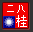
<style>
.page{position:relative;width:33px;height:32px;background:#f20000}
.page>*{position:absolute;margin:0}
.t1{font:10.4px "SimSun";color:#ffffff}
.t2{font:11.7px "SimSun";color:#ffffff}
</style>
<div class="page">
<p class="t1" style="left:7px;top:5px;width:18px;height:8px">二八</p>
<p class="t2" style="left:16px;top:15px;width:11px;height:12px">桂</p>
</div>
